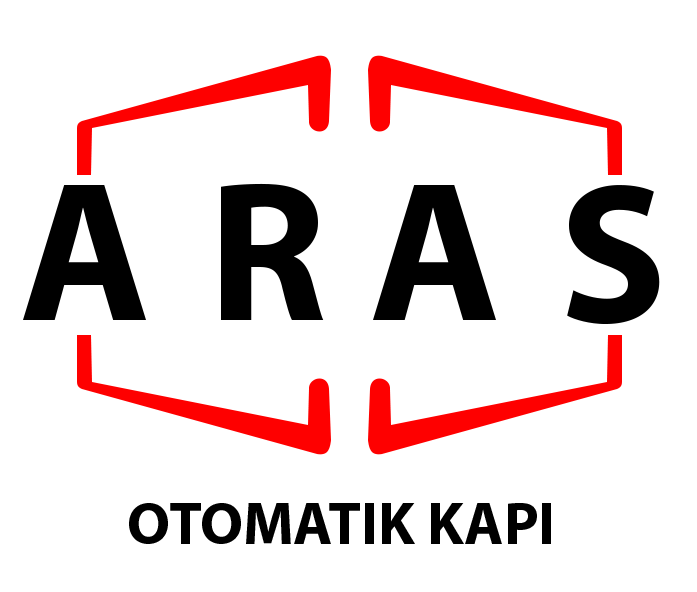
<style>
.page{position:relative;width:697px;height:592px;background:#ffffff}
.page>*{position:absolute;margin:0}
.t1{font:200.4px "MyriadHebrew-Bold";color:#000000}
.t2{font:60px "MyriadHebrew-Bold";color:#000000}
</style>
<div class="page">
<p class="t1" style="left:23px;top:185px;width:123px;height:135px">A</p>
<p class="t1" style="left:221px;top:183px;width:103px;height:137px">R</p>
<p class="t1" style="left:373px;top:185px;width:123px;height:135px">A</p>
<p class="t1" style="left:567px;top:185px;width:93px;height:139px">S</p>
<p class="t2" style="left:129px;top:503px;width:422px;height:41px">OTOMATIK KAPI</p>
</div>
